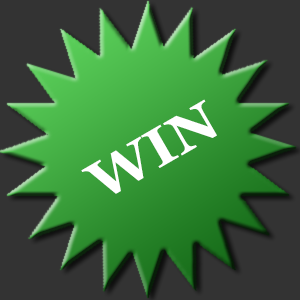
<style>
.page{position:relative;width:300px;height:300px;background:#333333}
.page>*{position:absolute;margin:0}
.t1{font:53.7px "Georgia-Bold";color:#ffffff;scale:1.09 1}
</style>
<div class="page">
<p class="t1" style="left:81px;top:99px;width:136px;height:95px;rotate:-30deg">WIN</p>
</div>
